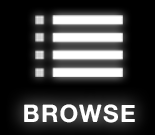
<style>
.page{position:relative;width:155px;height:135px;background:#000000}
.page>*{position:absolute;margin:0}
.t1{font:24px "AlteHaasGrotesk_Bold";letter-spacing:0.05em;color:#ffffff}
</style>
<div class="page">
<p class="t1" style="left:24px;top:104px;width:111px;height:19px">BROWSE</p>
</div>
